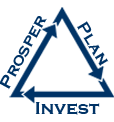
<style>
.page{position:relative;width:114px;height:122px;background:#ffffff}
.page>*{position:absolute;margin:0}
.t1{font:17px "CopperplateGothic-Bold";color:#003366}
.t2{font:18px "CopperplateGothic-Bold";color:#003366}
</style>
<div class="page">
<p class="t1" style="left:0px;top:16px;width:47px;height:74px;rotate:-62deg">Prosper</p>
<p class="t1" style="left:77px;top:21px;width:32px;height:45px;rotate:59deg">Plan</p>
<p class="t2" style="left:35px;top:102px;width:65px;height:13px">Invest</p>
</div>
